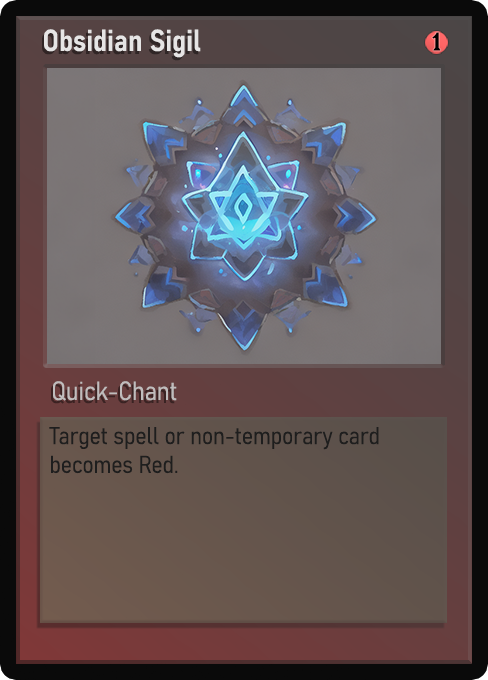
<style>
.page{position:relative;width:488px;height:680px}
.page>*{position:absolute;margin:0}
.t1{font:30px "Bahnschrift-SemiBoldSemiCondensed";color:#f2f2f2;font-weight:bold}
.t2{font:25px "WTRRoycroft";color:#000000;font-weight:bold;scale:1.09 1}
.t3{font:26px "Bahnschrift-LightSemiCondensed";color:#c8c8c8;font-weight:bold}
.t4{font:24px "Bahnschrift-LightSemiCondensed";color:#1e1e1e;font-weight:bold}
</style>
<div class="page">
<p class="t1" style="left:44px;top:29px;width:157px;height:29px;opacity:0.9">Obsidian Sigil</p>
<p class="t2" style="left:432px;top:32px;width:9px;height:19px">1</p>
<p class="t3" style="left:53px;top:381px;width:124px;height:20px;opacity:0.9">Quick-Chant</p>
<p class="t4" style="left:49px;top:427px;width:330px;height:47px">Target spell or non-temporary card becomes Red.</p>
</div>
